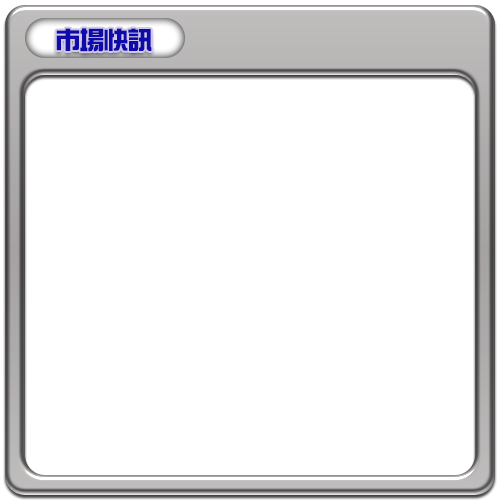
<style>
.page{position:relative;width:500px;height:500px;background:#ffffff}
.page>*{position:absolute;margin:0}
.t1{font:24px "¥þ¯uºîÃÀÅé";color:#0f0ba9}
</style>
<div class="page">
<p class="t1" style="left:56px;top:28px;width:96px;height:24px">市場快訊</p>
</div>
